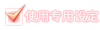
<style>
.page{position:relative;width:100px;height:30px;background:#ffffff}
.page>*{position:absolute;margin:0}
.t1{font:12px "SourceHanSansSC-Regular";color:#fff1f2;font-weight:bold}
</style>
<div class="page">
<p class="t1" style="left:25px;top:10px;width:74px;height:12px">使用专用设定</p>
</div>
